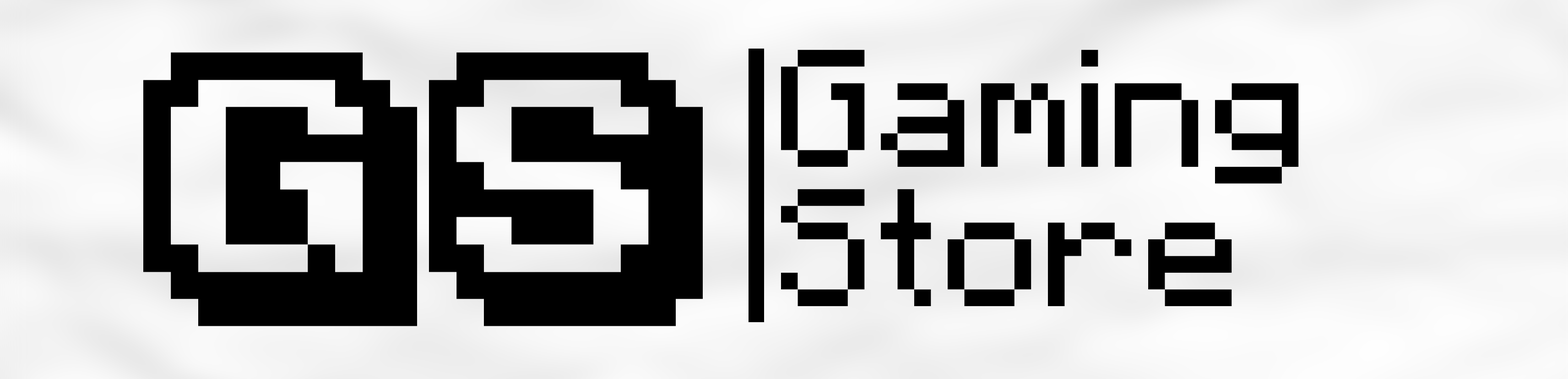
<style>
.page{position:relative;width:1568px;height:379px}
.page>*{position:absolute;margin:0}
.t1{font:280.4px "KarmaticArcade";letter-spacing:0.14em;color:#000000}
.t2{font:133.5px "Minecraft";color:#000000}
</style>
<div class="page">
<p class="t1" style="left:143px;top:52px;width:560px;height:274px">GS</p>
<p class="t2" style="left:781px;top:49px;width:518px;height:135px">Gaming</p>
<p class="t2" style="left:781px;top:189px;width:451px;height:117px">Store</p>
</div>
